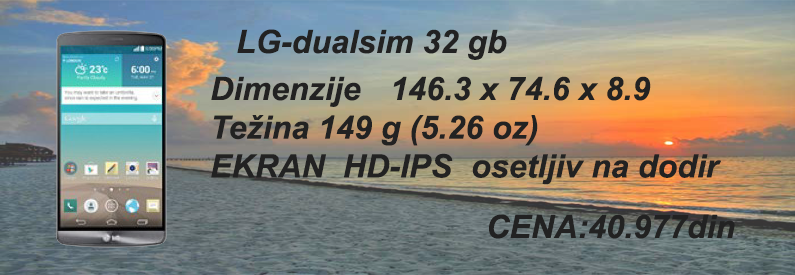
<style>
.page{position:relative;width:795px;height:275px}
.page>*{position:absolute;margin:0}
.t1{font:32.3px "Arial-BoldItalicMT";color:#222222}
</style>
<div class="page">
<p class="t1" style="left:237px;top:29px;width:270px;height:31px">LG-dualsim 32 gb</p>
<p class="t1" style="left:211px;top:76px;width:511px;height:109px">Dimenzije 146.3 x 74.6 x 8.9 <br>Težina 149 g (5.26 oz)<br>EKRAN  HD-IPS  osetljiv na dodir</p>
<p class="t1" style="left:489px;top:214px;width:246px;height:25px">CENA:40.977din</p>
</div>
